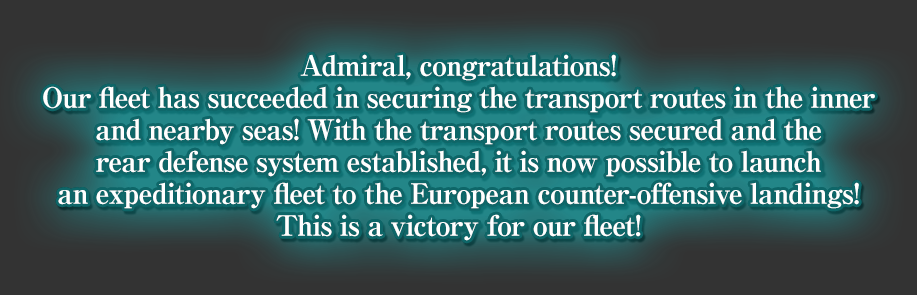
<style>
.page{position:relative;width:917px;height:295px;background:#333333}
.page>*{position:absolute;margin:0}
.t1{font:28px/32px "RyuminPro-ExBold";letter-spacing:-0.04em;color:#ffffff}
</style>
<div class="page">
<p class="t1" style="left:43px;top:54px;width:832px;height:187px;text-align:center">Admiral, congratulations!<br>Our fleet has succeeded in securing the transport routes in the inner<br>and nearby seas! With the transport routes secured and the<br>rear defense system established, it is now possible to launch<br>an expeditionary fleet to the European counter-offensive landings!<br>This is a victory for our fleet!</p>
</div>
